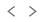
<style>
.page{position:relative;width:44px;height:22px;background:#ffffff}
.page>*{position:absolute;margin:0}
.t1{font:18px "DidactGothic";color:#6d6c67;scale:1.07 1}
</style>
<div class="page">
<p class="t1" style="left:7px;top:6px;width:8px;height:11px;rotate:180deg">&gt;</p>
<p class="t1" style="left:29px;top:6px;width:8px;height:11px">&gt;</p>
</div>
